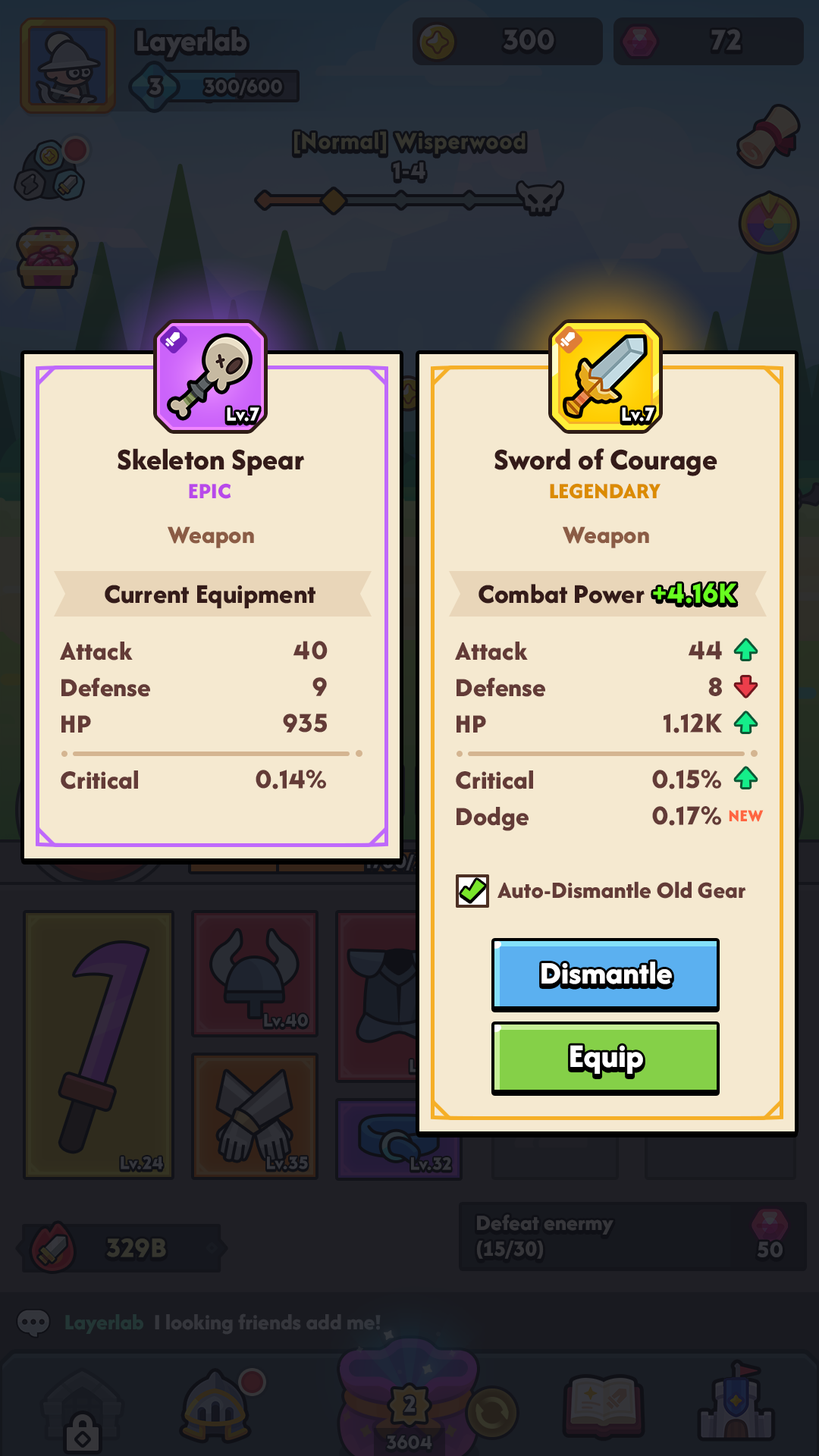
<style>
.page{position:relative;width:819px;height:1456px;background:#f5e9d0}
.page>*{position:absolute;margin:0}
.t1{font:19.3px "LTAvocado-Bold";color:#ffffff}
.t2{font:31.1px "AfacadFlux-ExtraBold";color:#341b19}
.t3{font:22.7px "AfacadFlux-ExtraBold";color:#b849ea;text-transform:uppercase}
.t4{font:22.7px "AfacadFlux-ExtraBold";color:#db8b00;text-transform:uppercase}
.t5{font:25.8px "AfacadFlux-ExtraBold";color:#8b5c45}
.t6{font:28.1px "AfacadFlux-ExtraBold";color:#341b19}
.t7{font:28.1px "LTAvocado-Bold";color:#69ff20}
.t8{font:27.3px/36.4px "AfacadFlux-ExtraBold";color:#633b37}
.t9{font:27.3px/36.4px "LTAvocado-Bold";color:#633b37}
.t10{font:27.3px "AfacadFlux-ExtraBold";color:#633b37}
.t11{font:27.3px "LTAvocado-Bold";color:#633b37}
.t12{font:17.4px "AfacadFlux-ExtraBold";color:#ff6541;text-transform:uppercase}
.t13{font:24.3px "AfacadFlux-ExtraBold";color:#633b37}
.t14{font:32.8px "AfacadFlux-ExtraBold";color:#ffffff}
.t15{font:34.1px "AfacadFlux-ExtraBold";color:#ffffff}
</style>
<div class="page">
<p class="t1" style="left:227px;top:407px;width:32px;height:15px">Lv.7</p>
<p class="t1" style="left:622px;top:407px;width:32px;height:15px">Lv.7</p>
<p class="t2" style="left:118px;top:448px;width:187px;height:27px">Skeleton Spear</p>
<p class="t2" style="left:494px;top:448px;width:223px;height:28px">Sword of Courage</p>
<p class="t3" style="left:189px;top:483px;width:42px;height:16px">Epic</p>
<p class="t4" style="left:550px;top:483px;width:110px;height:16px">Legendary</p>
<p class="t5" style="left:168px;top:526px;width:86px;height:22px">Weapon</p>
<p class="t5" style="left:563px;top:526px;width:86px;height:22px">Weapon</p>
<p class="t6" style="left:105px;top:585px;width:210px;height:24px">Current Equipment</p>
<p class="t6" style="left:479px;top:584px;width:166px;height:20px">Combat Power</p>
<p class="t7" style="left:653px;top:583px;width:83px;height:21px">+4.16K</p>
<p class="t8" style="left:60px;top:642px;width:90px;height:91px">Attack<br>Defense<br>HP</p>
<p class="t9" style="left:283px;top:641px;width:45px;height:92px;text-align:right">40<br>9<br>935</p>
<p class="t8" style="left:455px;top:642px;width:90px;height:91px">Attack<br>Defense<br>HP</p>
<p class="t9" style="left:664px;top:641px;width:59px;height:92px;text-align:right">44<br>8<br>1.12K</p>
<p class="t10" style="left:61px;top:770px;width:77px;height:19px">Critical</p>
<p class="t11" style="left:256px;top:770px;width:70px;height:19px">0.14%</p>
<p class="t8" style="left:456px;top:770px;width:77px;height:61px">Critical<br>Dodge</p>
<p class="t9" style="left:652px;top:770px;width:69px;height:56px;text-align:right">0.15%<br>0.17%</p>
<p class="t12" style="left:729px;top:810px;width:35px;height:12px">New</p>
<p class="t13" style="left:497px;top:881px;width:249px;height:18px">Auto-Dismantle Old Gear</p>
<p class="t14" style="left:541px;top:962px;width:131px;height:22px">Dismantle</p>
<p class="t15" style="left:570px;top:1045px;width:73px;height:29px">Equip</p>
</div>
